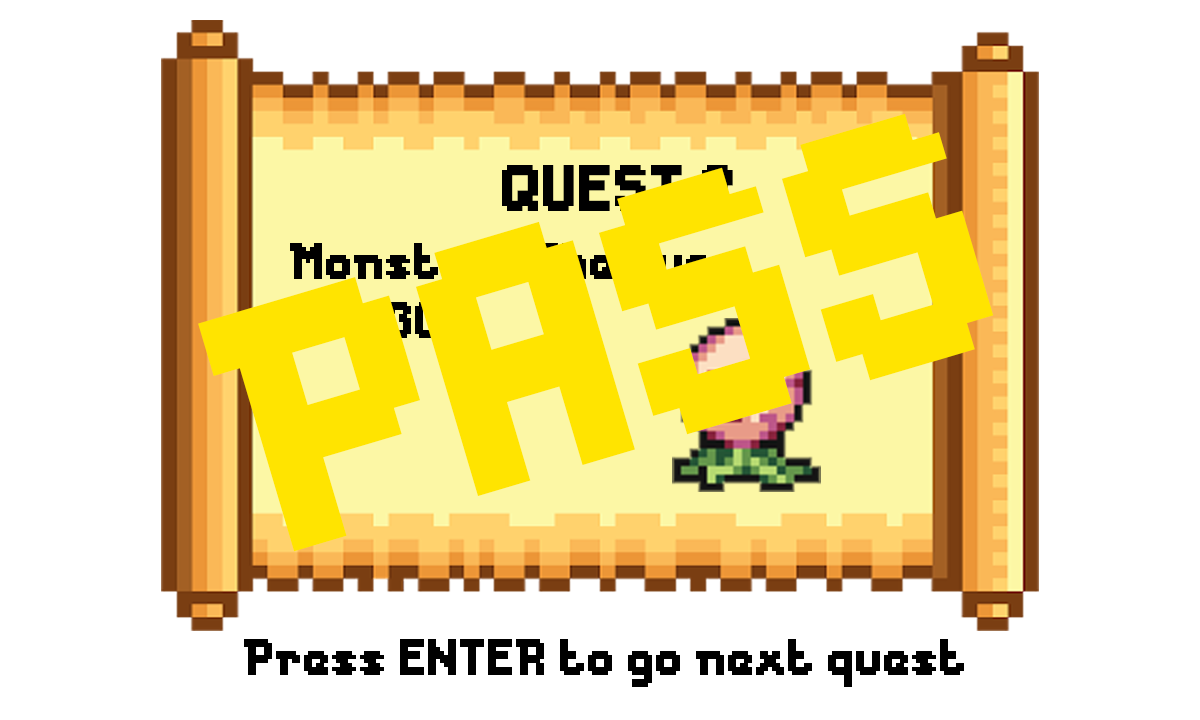
<style>
.page{position:relative;width:1200px;height:720px;background:#ffffff}
.page>*{position:absolute;margin:0}
.t1{font:327.3px "Messe-Duesseldorf";color:#ffe400}
.t2{font:61.3px "Messe-Duesseldorf";color:#000000}
.t3{font:48px "Messe-Duesseldorf"}
.t4{font:48px "Messe-Duesseldorf";color:#ffe400}
.t5{font:48px "Messe-Duesseldorf";color:#000000}
</style>
<div class="page">
<p class="t1" style="left:198px;top:113px;width:796px;height:439px;rotate:-17deg">PASS</p>
<p class="t2" style="left:502px;top:165px;width:231px;height:46px">QUEST 2</p>
<p class="t3" style="left:290px;top:243px;width:420px;height:48px">Monster : The Eye</p>
<p class="t4" style="left:291px;top:302px;width:148px;height:36px">HP : 30</p>
<p class="t5" style="left:244px;top:639px;width:720px;height:48px">Press ENTER to go next quest</p>
</div>
